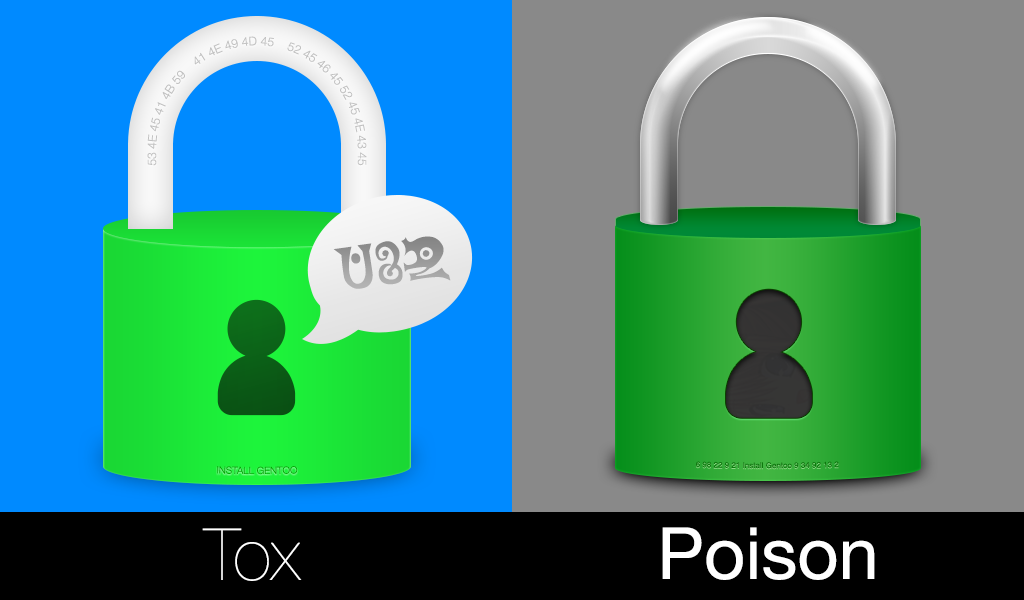
<style>
.page{position:relative;width:1024px;height:600px;background:#898989}
.page>*{position:absolute;margin:0}
.t1{font:12px "HelveticaNeue-Light";color:#c1c1c1}
.t2{font:60px "MadokaRunes";color:#9a9a9a}
.t3{font:10px "HelveticaNeue-Light";color:#00a900}
.t4{font:72px "HelveticaNeue-UltraLight";color:#ffffff}
.t5{font:72px "HelveticaNeue";color:#ffffff}
</style>
<div class="page">
<p class="t1" style="left:147px;top:36px;width:220px;height:130px;text-align:center">53 4E 45 41 4B 59    41 4E 49 4D 45    52 45 46 45 52 45 4E 43 45</p>
<p class="t2" style="left:333px;top:236px;width:118px;height:53px;rotate:-8deg">TOX</p>
<p class="t3" style="left:217px;top:466px;width:81px;height:9px">INSTALL GENTOO</p>
<p class="t4" style="left:202px;top:528px;width:100px;height:53px">Tox</p>
<p class="t5" style="left:662px;top:527px;width:213px;height:53px">Poison</p>
</div>
